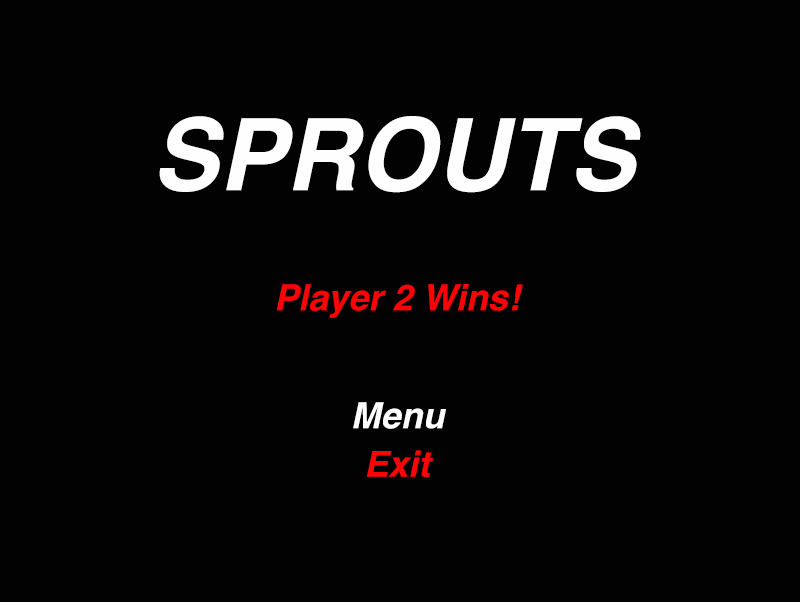
<style>
.page{position:relative;width:800px;height:602px;background:#020203}
.page>*{position:absolute;margin:0}
.t1{font:100px "Helvetica-BoldOblique";color:#fefefe}
.t2{font:36px "Helvetica-BoldOblique";color:#fe0208}
.t3{font:36px "Helvetica-BoldOblique";color:#fefefe}
</style>
<div class="page">
<p class="t1" style="left:159px;top:116px;width:482px;height:77px">SPROUTS</p>
<p class="t2" style="left:276px;top:284px;width:247px;height:34px">Player 2 Wins!</p>
<p class="t3" style="left:353px;top:402px;width:93px;height:27px">Menu</p>
<p class="t2" style="left:367px;top:450px;width:67px;height:27px">Exit</p>
</div>
